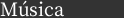
<style>
.page{position:relative;width:124px;height:18px;background:#333333}
.page>*{position:absolute;margin:0}
.t1{font:22px "OfficialFateFont-Medium";color:#ffffff}
</style>
<div class="page">
<p class="t1" style="left:0px;top:0px;width:65px;height:17px">Música</p>
</div>
